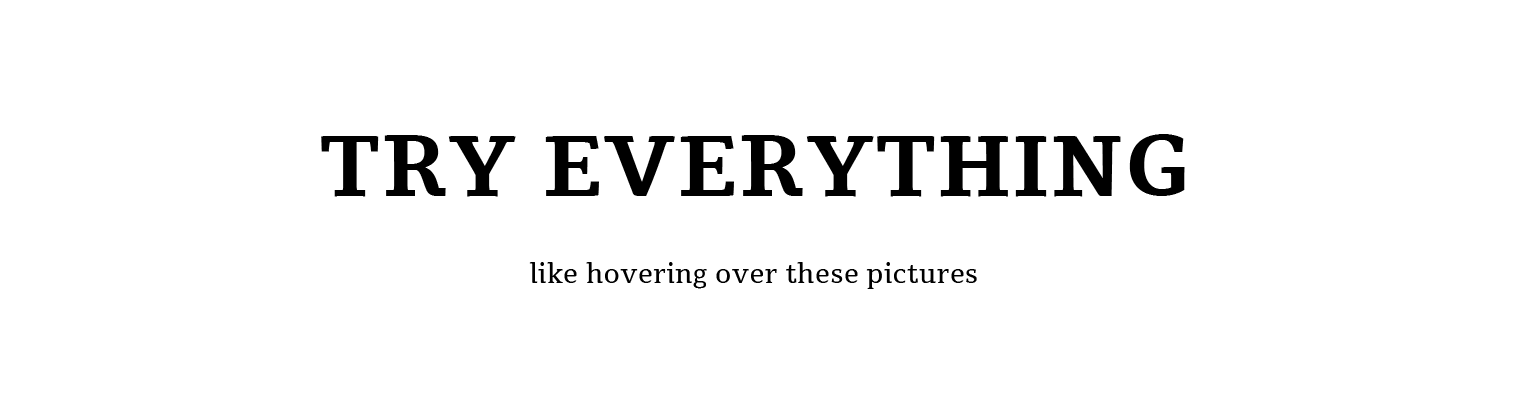
<style>
.page{position:relative;width:1522px;height:416px;background:#ffffff}
.page>*{position:absolute;margin:0}
.t1{font:86.2px "Tienne-Bold";letter-spacing:0.027em;color:#000000}
.t2{font:25.7px "Tienne-Regular";letter-spacing:0.027em;color:#000000}
</style>
<div class="page">
<p class="t1" style="left:321px;top:134px;width:864px;height:63px">TRY EVERYTHING</p>
<p class="t2" style="left:529px;top:262px;width:448px;height:27px">like hovering over these pictures</p>
</div>
